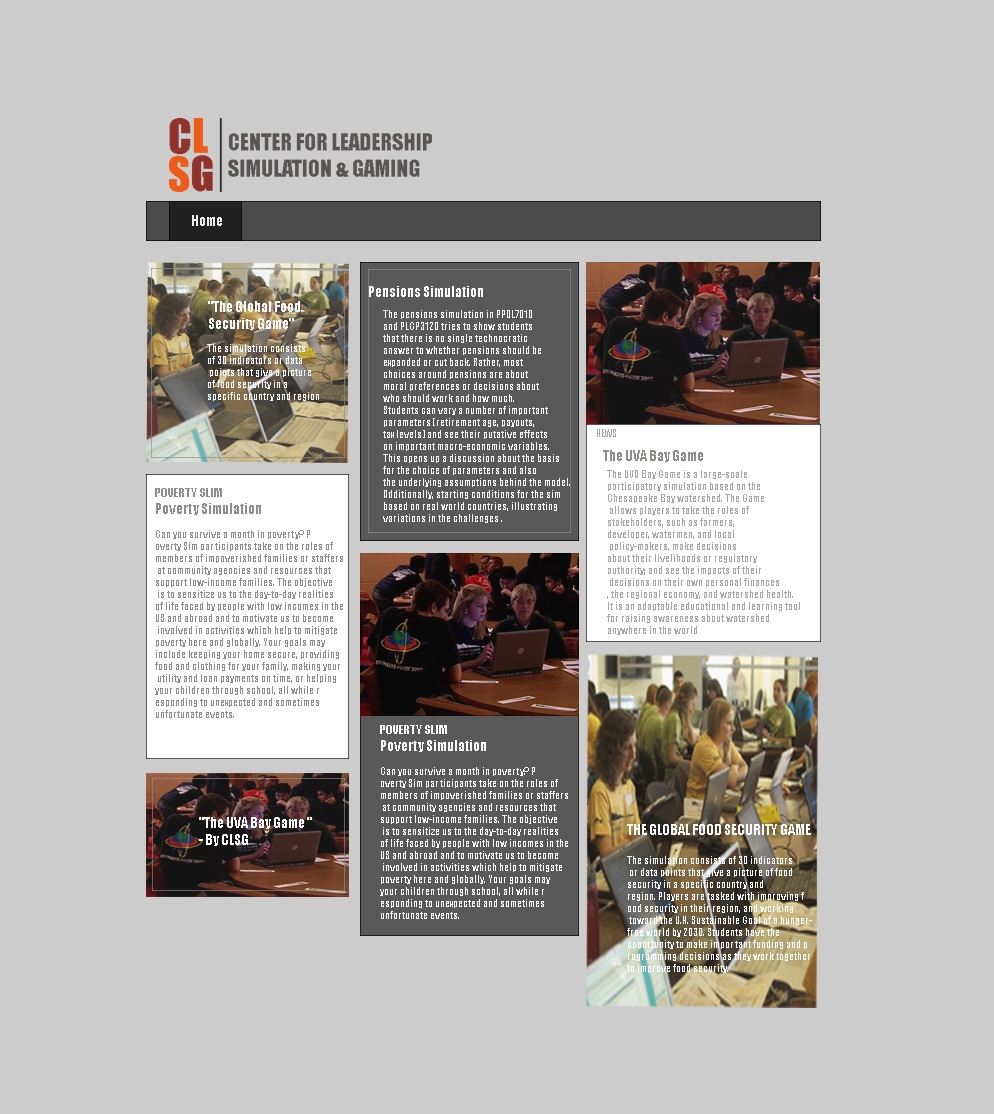
<style>
.page{position:relative;width:994px;height:1114px;background:#cccccc}
.page>*{position:absolute;margin:0}
.t1{font:14px "Impact";color:#efeeee}
.t2{font:14px "Impact";color:#faf9f9}
.t3{font:10px "Impact";color:#faf9f9}
.t4{font:10px "Impact";color:#aaa6a5}
.t5{font:14px "Impact";color:#8f8c8c}
.t6{font:10px "Impact";color:#8f8c8c}
.t7{font:12px "Impact";color:#8f8c8c}
.t8{font:10px "Impact";color:#fdfcfc}
.t9{font:12px "Impact";color:#fdfcfc}
.t10{font:14px "Impact";color:#fdfcfc}
</style>
<div class="page">
<p class="t1" style="left:192px;top:215px;width:30px;height:11px">Home</p>
<p class="t2" style="left:369px;top:286px;width:114px;height:11px">Pensions Simulation</p>
<p class="t2" style="left:208px;top:301px;width:92px;height:29px">"The Global Food Security Game"</p>
<p class="t3" style="left:383px;top:310px;width:187px;height:213px">The pensions simulation in PPOL7010 <br>and PLCP3120 tries to show students <br>that there is no single technocratic <br>answer to whether pensions should be <br>expanded or cut back. Rather, most <br>choices around pensions are about <br>moral preferences or decisions about <br>who should work and how much. <br>Students can vary a number of important <br>parameters (retirement age, payouts, <br>tax levels) and see their putative effects <br>on important macro-economic variables. <br>This opens up a discussion about the basis <br>for the choice of parameters and also <br>the underlying assumptions behind the model. <br>Additionally, starting conditions for the sim <br>based on real world countries, illustrating <br>variations in the challenges .</p>
<p class="t3" style="left:207px;top:344px;width:112px;height:57px">The simulation consists <br>of 30 indicators or data<br> points that give a picture <br>of food security in a <br>specific country and region</p>
<p class="t4" style="left:597px;top:429px;width:19px;height:8px">NEWS</p>
<p class="t5" style="left:603px;top:450px;width:100px;height:12px">The UVA Bay Game</p>
<p class="t4" style="left:607px;top:470px;width:193px;height:165px"><span class="t5"><br></span>The UVA Bay Game is a large-scale <br>participatory simulation based on the <br>Chesapeake Bay watershed. The Game<br> allows players to take the roles of <br>stakeholders, such as farmers, <br>developer, watermen, and local<br> policy-makers, make decisions <br>about their livelihoods or regulatory <br>authority; and see the impacts of their<br> decisions on their own personal finances<br>, the regional economy, and watershed health. <br>It is an adaptable educational and learning tool <br>for raising awareness about watershed <br>anywhere in the world</p>
<p class="t6" style="left:155px;top:488px;width:188px;height:230px"><span class="t7">POVERTY SLIM<br></span><span class="t5">Poverty Simulation<br></span><br>Can you survive a month in poverty? P<br>overty Sim participants take on the roles of <br>members of impoverished families or staffers<br> at community agencies and resources that <br>support low-income families. The objective<br> is to sensitize us to the day-to-day realities <br>of life faced by people with low incomes in the <br>US and abroad and to motivate us to become<br> involved in activities which help to mitigate <br>poverty here and globally. Your goals may <br>include keeping your home secure, providing <br>food and clothing for your family, making your<br> utility and loan payments on time, or helping <br>your children through school, all while r<br>esponding to unexpected and sometimes <br>unfortunate events.</p>
<p class="t8" style="left:380px;top:725px;width:188px;height:194px"><span class="t9">POVERTY SLIM<br></span><span class="t10">Poverty Simulation<br></span><br>Can you survive a month in poverty? P<br>overty Sim participants take on the roles of <br>members of impoverished families or staffers<br> at community agencies and resources that <br>support low-income families. The objective<br> is to sensitize us to the day-to-day realities <br>of life faced by people with low incomes in the <br>US and abroad and to motivate us to become<br> involved in activities which help to mitigate <br>poverty here and globally. Your goals may <br>your children through school, all while r<br>esponding to unexpected and sometimes <br>unfortunate events.</p>
<p class="t10" style="left:199px;top:817px;width:113px;height:29px">"The UVA Bay Game "<br>- By CLSG</p>
<p class="t8" style="left:627px;top:824px;width:185px;height:149px"><span class="t10">THE GLOBAL FOOD SECURITY GAME<br><br></span>The simulation consists of 30 indicators<br> or data points that give a picture of food <br>security in a specific country and <br>region. Players are tasked with improving f<br>ood security in their region, and working<br> toward the U.N. Sustainable Goal of a hunger-<br>free world by 2030. Students have the <br>opportunity to make important funding and p<br>rogramming decisions as they work together <br>to improve food security.</p>
</div>
